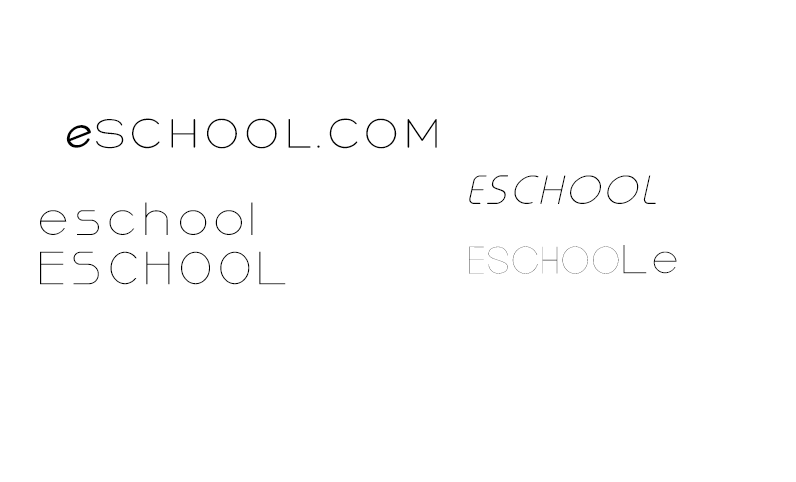
<style>
.page{position:relative;width:796px;height:482px;background:#ffffff}
.page>*{position:absolute;margin:0}
.t1{font:77px "Hero-Light";letter-spacing:0.1em;color:#000000;font-variant:small-caps;scale:1.05 1}
.t2{font:77px "TypoRound-LightItalicDemo";letter-spacing:0.1em;color:#000000;scale:1.05 1}
.t3{font:40.6px "TypoRound-ThinItalicDemo";letter-spacing:0.1em;color:#000000;scale:1.05 1}
.t4{font:40.6px "Ormont_Light";letter-spacing:0.1em;color:#000000;scale:1.05 1}
.t5{font:35.3px "EuropeUnderground-Light";letter-spacing:0.1em;color:#000000;scale:1.05 1}
.t6{font:35.3px "Ormont_Light";letter-spacing:0.1em;color:#000000;scale:1.05 1}
</style>
<div class="page">
<p class="t1" style="left:66px;top:118px;width:371px;height:31px"><span class="t2">e</span>SCHOOL.COM</p>
<p class="t3" style="left:469px;top:175px;width:187px;height:29px">ESCHOOL</p>
<p class="t4" style="left:40px;top:202px;width:246px;height:83px">eschool<br>ESCHOOL</p>
<p class="t5" style="left:469px;top:245px;width:208px;height:29px">ESCHOO<span class="t6">Le</span></p>
</div>
